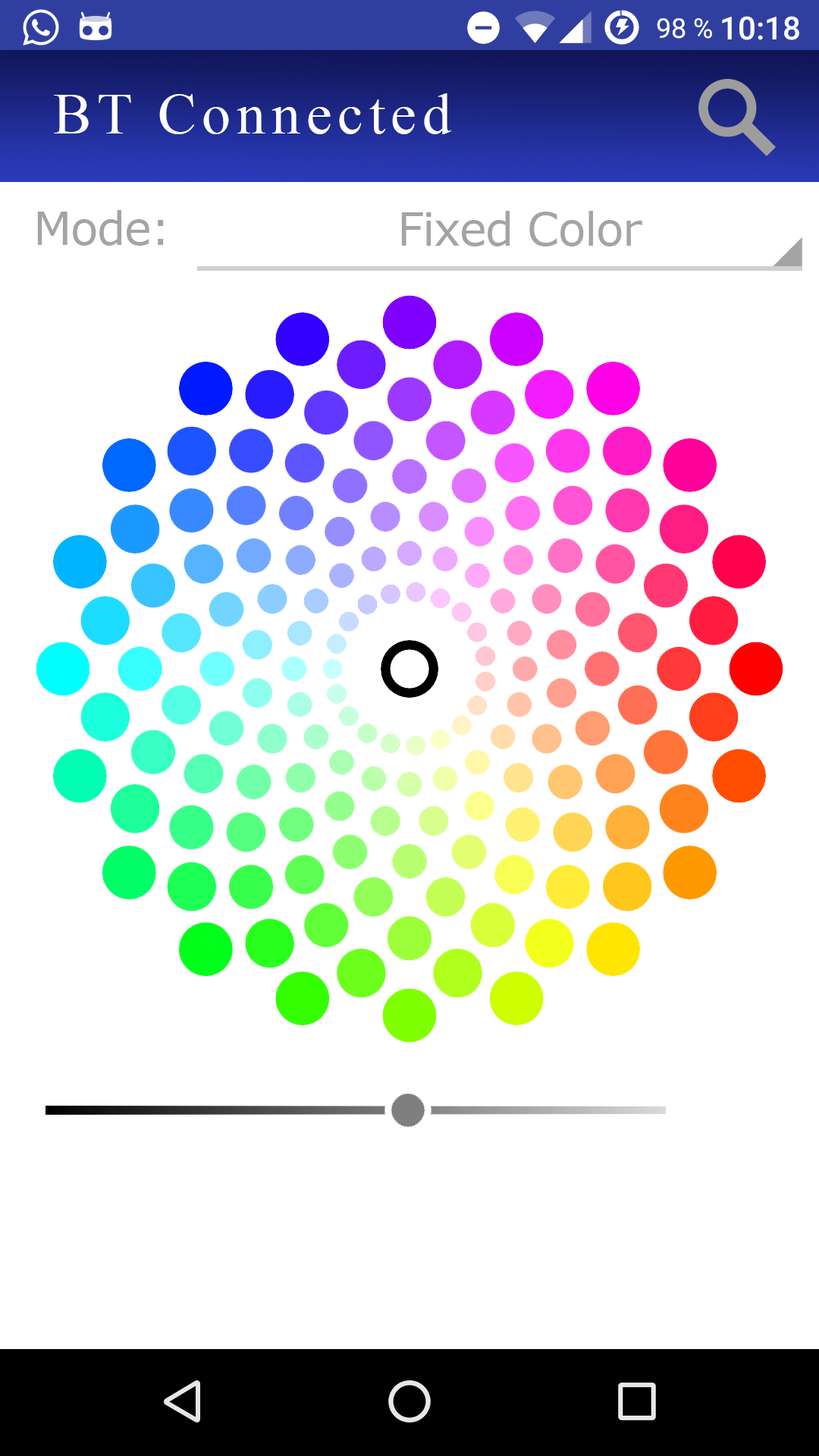
<style>
.page{position:relative;width:819px;height:1456px;background:#ffffff}
.page>*{position:absolute;margin:0}
.t1{font:57.8px "TimesNewRomanPSMT";letter-spacing:0.1em;color:#ffffff}
.t2{font:45.5px "Verdana";letter-spacing:-0.025em;color:#a4a4a4}
</style>
<div class="page">
<p class="t1" style="left:54px;top:93px;width:398px;height:41px">BT Connected</p>
<p class="t2" style="left:37px;top:210px;width:127px;height:36px">Mode:</p>
<p class="t2" style="left:401px;top:211px;width:241px;height:35px">Fixed Color</p>
</div>
